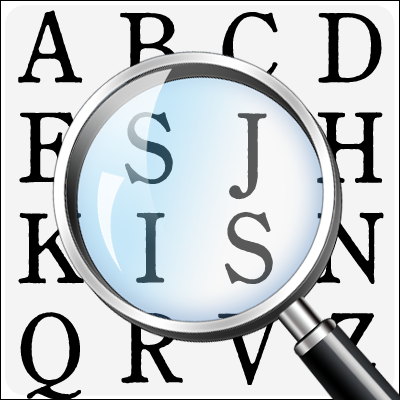
<style>
.page{position:relative;width:400px;height:400px;background:#f4f4f4}
.page>*{position:absolute;margin:0}
.t1{font:100px/100px "DJSShueiNMinStdN-L";color:#000000}
</style>
<div class="page">
<p class="t1" style="left:18px;top:10px;width:366px;height:391px">ＡＢＣＤ<br>ＥＳＪＨ<br>ＫＩＳＮ<br>ＱＲＶＺ</p>
</div>
